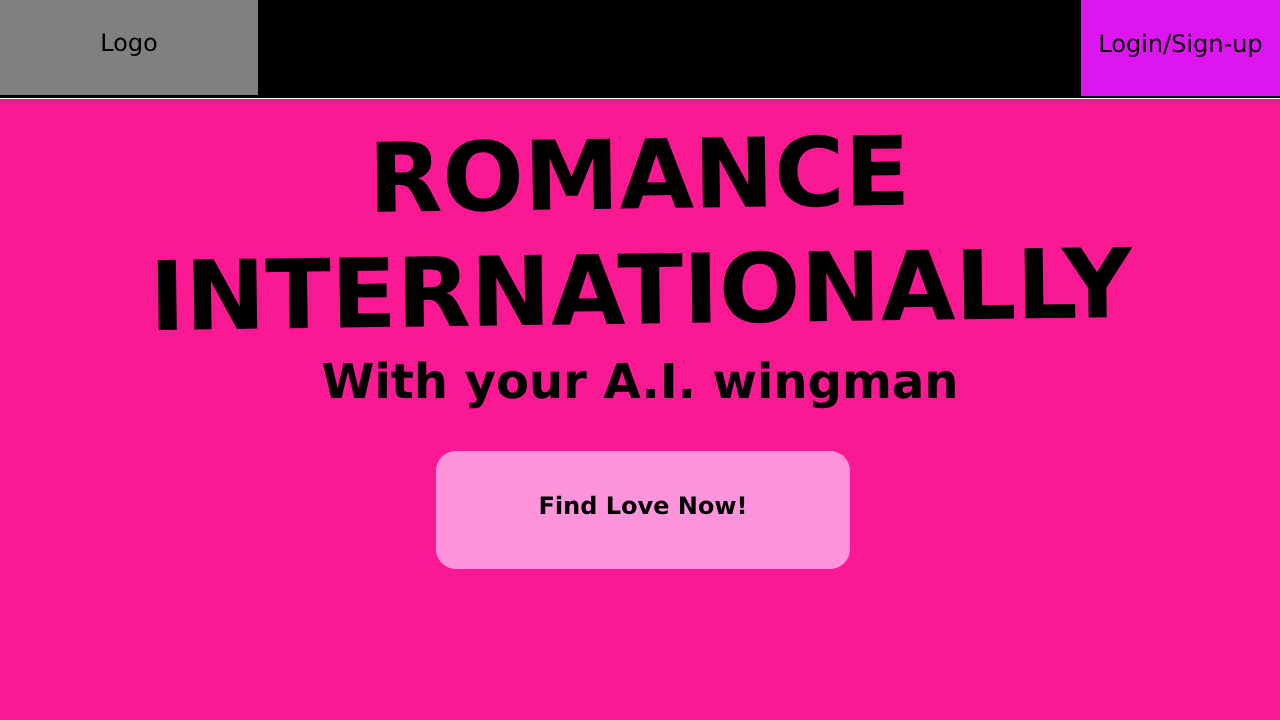
<style>
.page{position:relative;width:1280px;height:720px;background:#fa1993}
.page>*{position:absolute;margin:0}
.t1{font:24px "DejaVuSans";color:#000000}
.t2{font:96px "DejaVuSans-Bold";color:#000000}
.t3{font:48px "DejaVuSans-Bold";color:#000000}
.t4{font:24px "DejaVuSans-Bold";color:#000000}
</style>
<div class="page">
<p class="t1" style="left:102px;top:33px;width:55px;height:23px">Logo</p>
<p class="t1" style="left:1100px;top:33px;width:162px;height:24px">Login/Sign-up</p>
<p class="t2" style="left:157px;top:134px;width:976px;height:196px;rotate:-1deg">ROMANCE INTERNATIONALLY</p>
<p class="t3" style="left:322px;top:361px;width:633px;height:48px">With your A.I. wingman</p>
<p class="t4" style="left:540px;top:495px;width:205px;height:20px">Find Love Now!</p>
</div>
